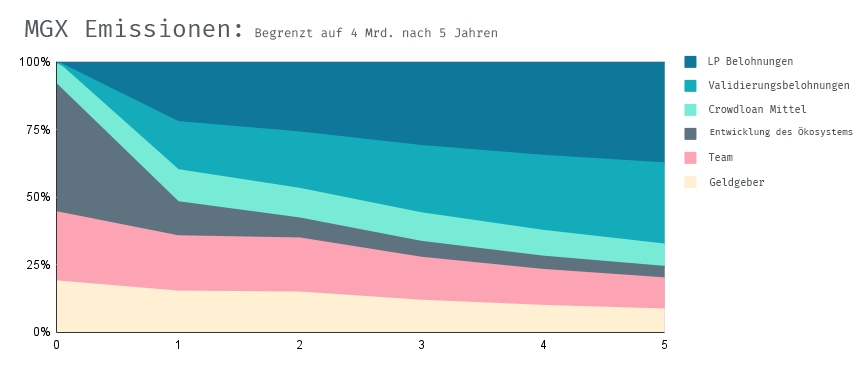
<style>
.page{position:relative;width:860px;height:371px;background:#ffffff}
.page>*{position:absolute;margin:0}
.t1{font:24px "FiraCode-Regular";color:#515b60}
.t2{font:12px "FiraCode-Light";color:#515b60}
.t3{font:10px "FiraCode-Regular";color:#515b60}
.t4{font:9px "FiraCode-Regular";color:#515b60}
</style>
<div class="page">
<p class="t1" style="left:25px;top:18px;width:216px;height:19px">MGX Emissionen:</p>
<p class="t2" style="left:255px;top:27px;width:242px;height:13px">Begrenzt auf 4 Mrd. nach 5 Jahren</p>
<p class="t3" style="left:708px;top:56px;width:85px;height:11px">LP Belohnungen</p>
<p class="t3" style="left:708px;top:80px;width:141px;height:11px">Validierungsbelohnungen</p>
<p class="t3" style="left:709px;top:104px;width:97px;height:9px">Crowdloan Mittel</p>
<p class="t4" style="left:710px;top:127px;width:143px;height:10px">Entwicklung des Ökosystems</p>
<p class="t3" style="left:708px;top:153px;width:25px;height:8px">Team</p>
<p class="t3" style="left:709px;top:177px;width:56px;height:11px">Geldgeber</p>
</div>
